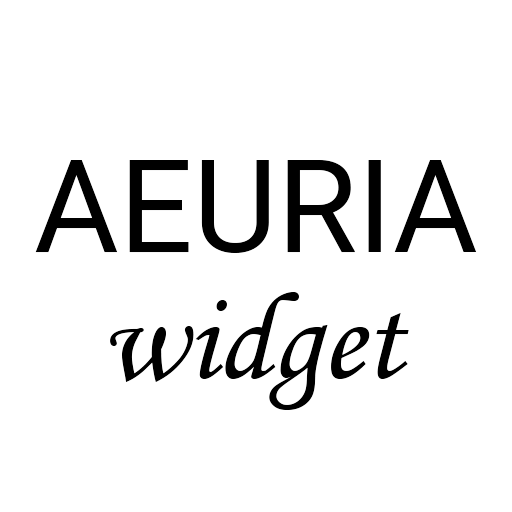
<style>
.page{position:relative;width:512px;height:512px;background:#ffffff}
.page>*{position:absolute;margin:0}
.t1{font:130px "Roboto-Regular";color:#000000}
.t2{font:125px "MonotypeCorsiva";color:#000000}
</style>
<div class="page">
<p class="t1" style="left:35px;top:160px;width:442px;height:93px">AEURIA</p>
<p class="t2" style="left:110px;top:292px;width:299px;height:118px">widget</p>
</div>
